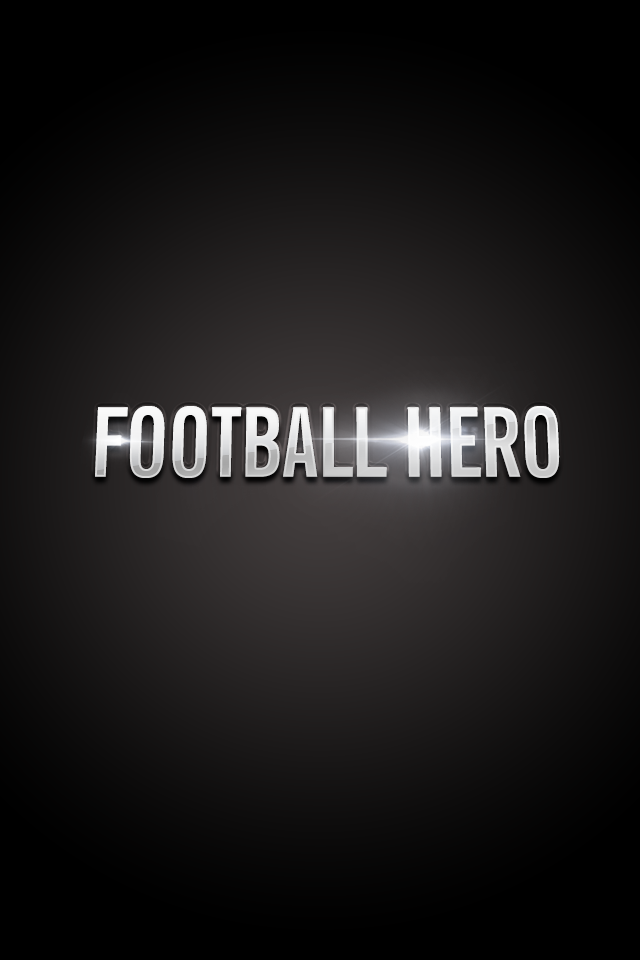
<style>
.page{position:relative;width:640px;height:960px}
.page>*{position:absolute;margin:0}
.t1{font:95.9px "NewsGothicBT-BoldExtraCondensed";letter-spacing:-0.01em}
</style>
<div class="page">
<p class="t1" style="left:95px;top:406px;width:465px;height:72px">FOOTBALL HERO</p>
<p class="t1" style="left:95px;top:406px;width:464px;height:72px">FOOTBALL HERO</p>
</div>
